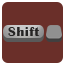
<style>
.page{position:relative;width:64px;height:64px;background:#6a2f29}
.page>*{position:absolute;margin:0}
.t1{font:13.3px "BritannicBold";letter-spacing:0.049em;color:#252424;scale:1.04 1}
</style>
<div class="page">
<p class="t1" style="left:8px;top:27px;width:32px;height:9px">Shift</p>
</div>
